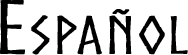
<style>
.page{position:relative;width:188px;height:55px;background:#ffffff}
.page>*{position:absolute;margin:0}
.t1{font:72px "Norse";color:#000000;font-variant:small-caps;font-weight:bold;scale:1.3 1}
</style>
<div class="page">
<p class="t1" style="left:0px;top:0px;width:188px;height:55px">Español</p>
</div>
